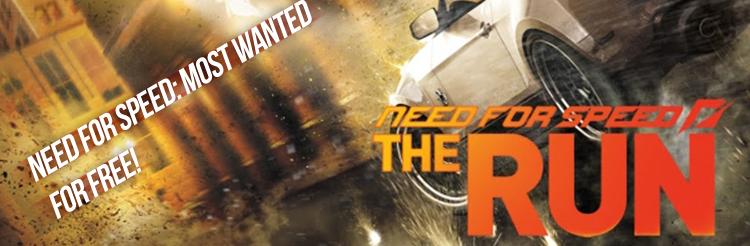
<style>
.page{position:relative;width:750px;height:246px}
.page>*{position:absolute;margin:0}
.t1{font:36px "BebasNeue";letter-spacing:-0.025em;color:#ffffff;font-style:italic}
</style>
<div class="page">
<p class="t1" style="left:27px;top:0px;width:285px;height:220px;rotate:-30deg">Need for Speed: Most wanted<br>FOR FREE!</p>
</div>
